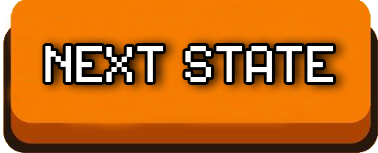
<style>
.page{position:relative;width:378px;height:153px}
.page>*{position:absolute;margin:0}
.t1{font:104px "2005_iannnnnAMD";color:#ffffff}
</style>
<div class="page">
<p class="t1" style="left:45px;top:46px;width:288px;height:36px">NEXT STATE</p>
</div>
